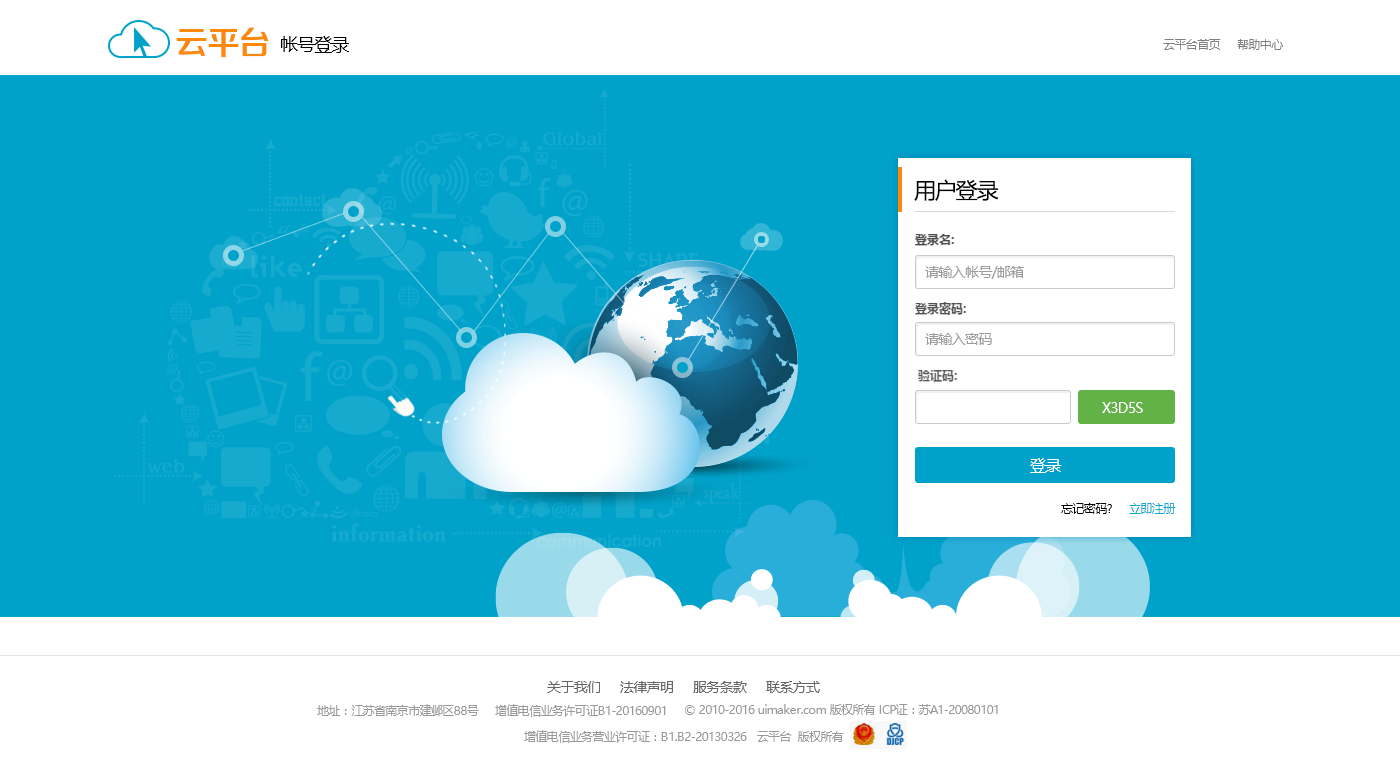
<style>
.page{position:relative;width:1400px;height:778px;background:#00a2ca}
.page>*{position:absolute;margin:0}
.t1{font:33.1px "FZZZHONGJW--GB1-0";letter-spacing:-0.05em;color:#fc880c}
.t2{font:18px "MicrosoftYaHei";letter-spacing:-0.05em;color:#000000}
.t3{font:12px "MicrosoftYaHei";letter-spacing:-0.05em;color:#808080}
.t4{font:22px "MicrosoftYaHei";letter-spacing:-0.05em;color:#000000}
.t5{font:14px "MicrosoftYaHei";letter-spacing:-0.05em;color:#9d9d9d}
.t6{font:14px "MicrosoftYaHei";letter-spacing:-0.05em;color:#ffffff}
.t7{font:16px "MicrosoftYaHei";letter-spacing:-0.05em;color:#ffffff}
.t8{font:12px "MicrosoftYaHei";letter-spacing:-0.05em;color:#000000}
.t9{font:12px "MicrosoftYaHei";letter-spacing:-0.05em;color:#14a9ce}
.t10{font:14px "MicrosoftYaHei";letter-spacing:-0.05em;color:#666666}
.t11{font:12px "MicrosoftYaHei";letter-spacing:-0.05em;color:#999999}
</style>
<div class="page">
<p class="t1" style="left:176px;top:27px;width:93px;height:31px">云平台</p>
<p class="t2" style="left:281px;top:36px;width:68px;height:17px">帐号登录</p>
<p class="t3" style="left:1163px;top:39px;width:121px;height:11px">云平台首页     帮助中心</p>
<p class="t4" style="left:914px;top:179px;width:85px;height:22px">用户登录</p>
<p class="t5" style="left:925px;top:266px;width:99px;height:13px">请输入帐号/邮箱</p>
<p class="t5" style="left:925px;top:333px;width:67px;height:12px">请输入密码</p>
<p class="t6" style="left:1102px;top:402px;width:41px;height:11px">X3D5S</p>
<p class="t7" style="left:1030px;top:458px;width:32px;height:15px">登录</p>
<p class="t8" style="left:1061px;top:503px;width:115px;height:11px">忘记密码?<span class="t9">     立即注册</span></p>
<p class="t10" style="left:547px;top:681px;width:273px;height:12px">关于我们      法律声明      服务条款      联系方式</p>
<p class="t11" style="left:317px;top:704px;width:349px;height:13px">地址：江苏省南京市建邺区88号     增值电信业务许可证B1-20160901</p>
<p class="t11" style="left:685px;top:704px;width:313px;height:11px">© 2010-2016 uimaker.com 版权所有 ICP证：苏A1-20080101</p>
<p class="t11" style="left:524px;top:730px;width:320px;height:13px">增值电信业务营业许可证：B1.B2-20130326   云平台  版权所有</p>
</div>
